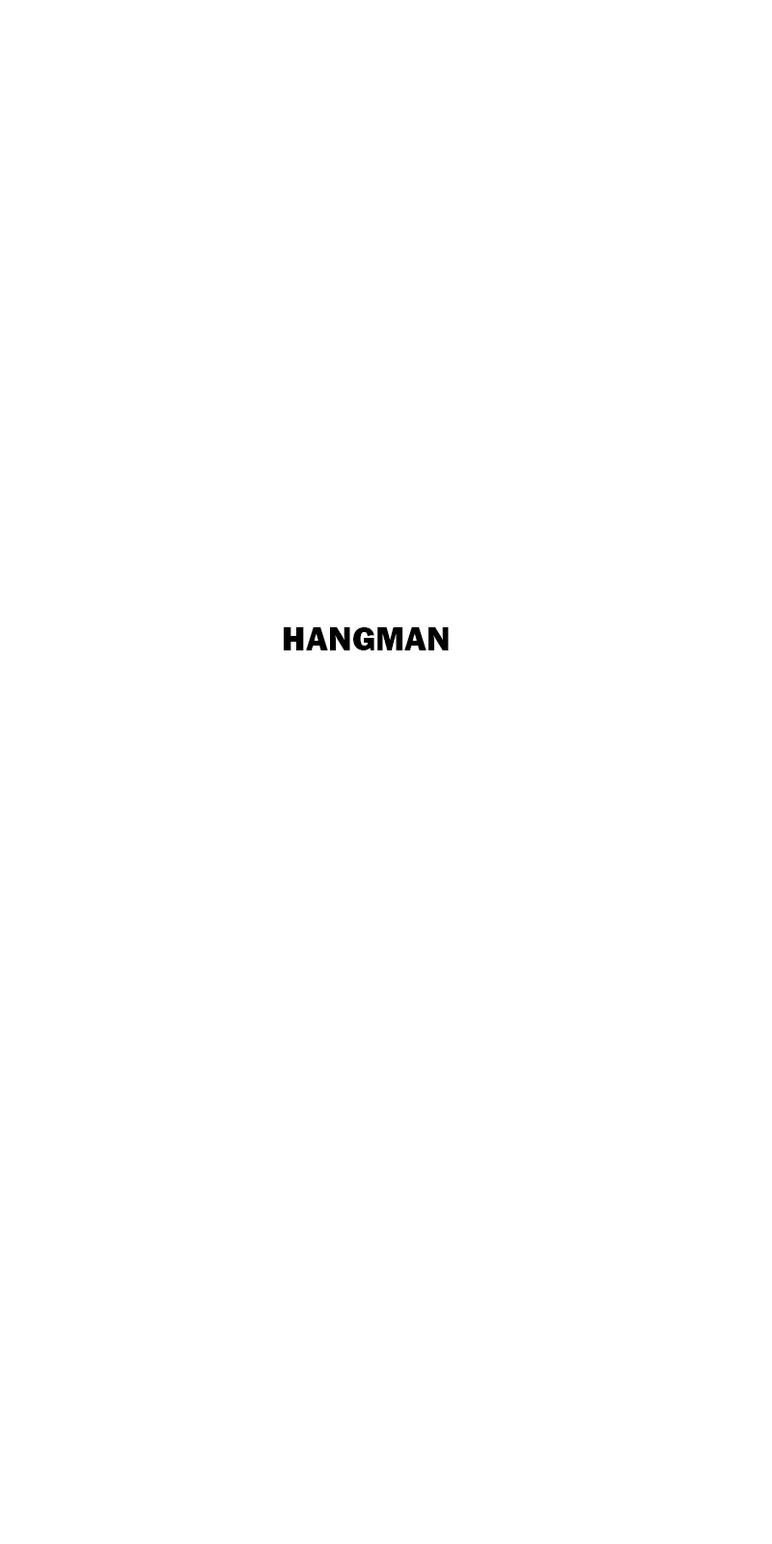
<style>
.page{position:relative;width:772px;height:1544px;background:#ffffff}
.page>*{position:absolute;margin:0}
.t1{font:34.7px "FranklinGothic-Heavy";color:#000000}
</style>
<div class="page">
<p class="t1" style="left:284px;top:627px;width:165px;height:24px">HANGMAN</p>
</div>
